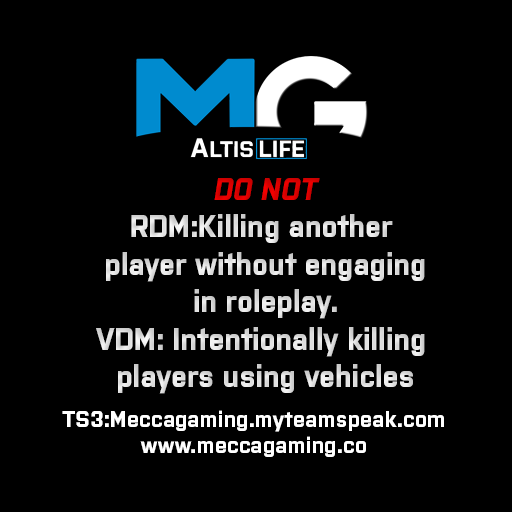
<style>
.page{position:relative;width:512px;height:512px;background:#000000}
.page>*{position:absolute;margin:0}
.t1{font:31.3px "Purista-Bold";color:#dfdede;scale:0.92 1}
.t2{font:31.3px "Purista-BoldItalic";color:#dfdede;scale:0.92 1}
.t3{font:22px "Purista-Bold";color:#ffffff}
</style>
<div class="page">
<p class="t1" style="left:96px;top:178px;width:329px;height:216px;text-align:center"><span class="t2">DO NOT<br></span>RDM:Killing another <br>player without engaging<br> in roleplay. <br>VDM: Intentionally killing <br>players using vehicles</p>
<p class="t3" style="left:62px;top:410px;width:382px;height:47px;text-align:center">TS3:Meccagaming.myteamspeak.com<br>www.meccagaming.co</p>
</div>
